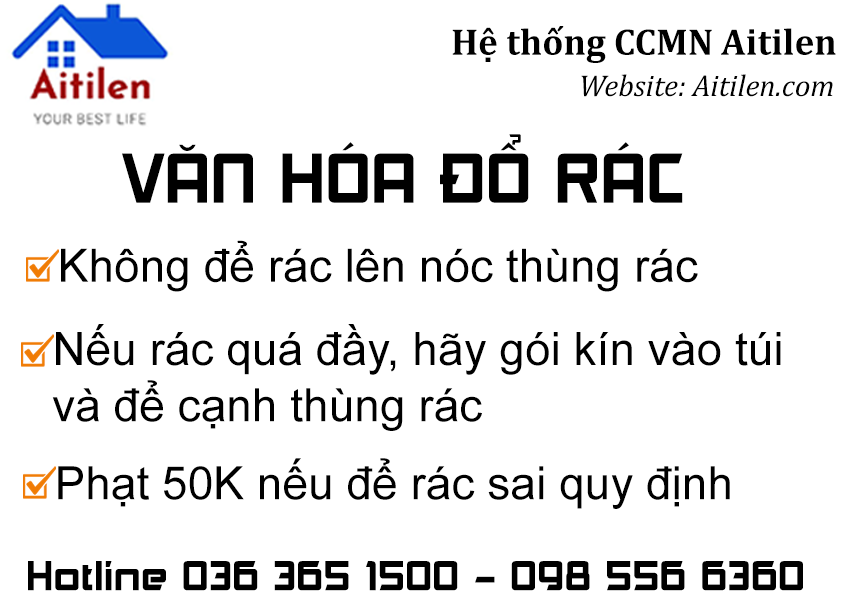
<style>
.page{position:relative;width:842px;height:595px;background:#ffffff}
.page>*{position:absolute;margin:0}
.t1{font:37.4px "Cambria-Bold";color:#000000}
.t2{font:30.5px "Cambria-Italic";color:#000000}
.t3{font:67.1px "UTM-Akashi";color:#000000}
.t4{font:46.1px "ArialMT";color:#000000}
.t5{font:46.1px/14.1px "ArialMT";color:#000000}
.t6{font:39.8px "UTM-Akashi";color:#000000}
</style>
<div class="page">
<p class="t1" style="left:452px;top:26px;width:384px;height:37px">Hệ thống CCMN Aitilen</p>
<p class="t2" style="left:581px;top:74px;width:252px;height:23px">Website: Aitilen.com</p>
<p class="t3" style="left:122px;top:134px;width:561px;height:69px">VĂN HÓA ĐỔ RÁC</p>
<p class="t4" style="left:61px;top:240px;width:637px;height:52px">Không để rác lên nóc thùng rác</p>
<p class="t5" style="left:52px;top:324px;width:729px;height:107px">Nếu rác quá đầy, hãy gói kín vào túi <br><br><br><br>và để cạnh thùng rác</p>
<p class="t4" style="left:58px;top:458px;width:672px;height:51px">Phạt 50K nếu để rác sai quy định</p>
<p class="t6" style="left:28px;top:561px;width:775px;height:30px">Hotline 036 365 1500 - 098 556 6360</p>
</div>
